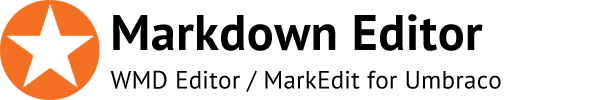
<style>
.page{position:relative;width:590px;height:100px;background:#ffffff}
.page>*{position:absolute;margin:0}
.t1{font:50px "PTSans-Bold";letter-spacing:0.01em;color:#000000}
.t2{font:25px "PTSans-Regular";letter-spacing:0.01em;color:#000000}
</style>
<div class="page">
<p class="t1" style="left:113px;top:14px;width:370px;height:37px">Markdown Editor</p>
<p class="t2" style="left:110px;top:70px;width:391px;height:22px">WMD Editor / MarkEdit for Umbraco</p>
</div>
